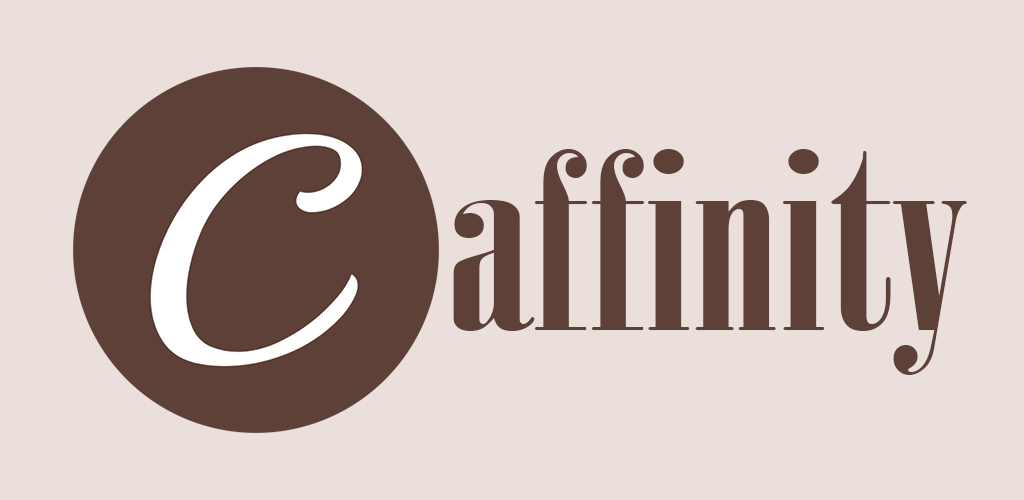
<style>
.page{position:relative;width:1024px;height:500px;background:#ebdfdb}
.page>*{position:absolute;margin:0}
.t1{font:244.7px "BodoniMTPosterCompressed";color:#5d4037;scale:1.2 1}
</style>
<div class="page">
<p class="t1" style="left:453px;top:149px;width:514px;height:226px">affinity</p>
</div>
